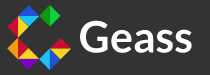
<style>
.page{position:relative;width:210px;height:75px;background:#333333}
.page>*{position:absolute;margin:0}
.t1{font:43px "Lato-Bold";color:#ffffff}
</style>
<div class="page">
<p class="t1" style="left:80px;top:20px;width:112px;height:33px">Geass</p>
</div>
